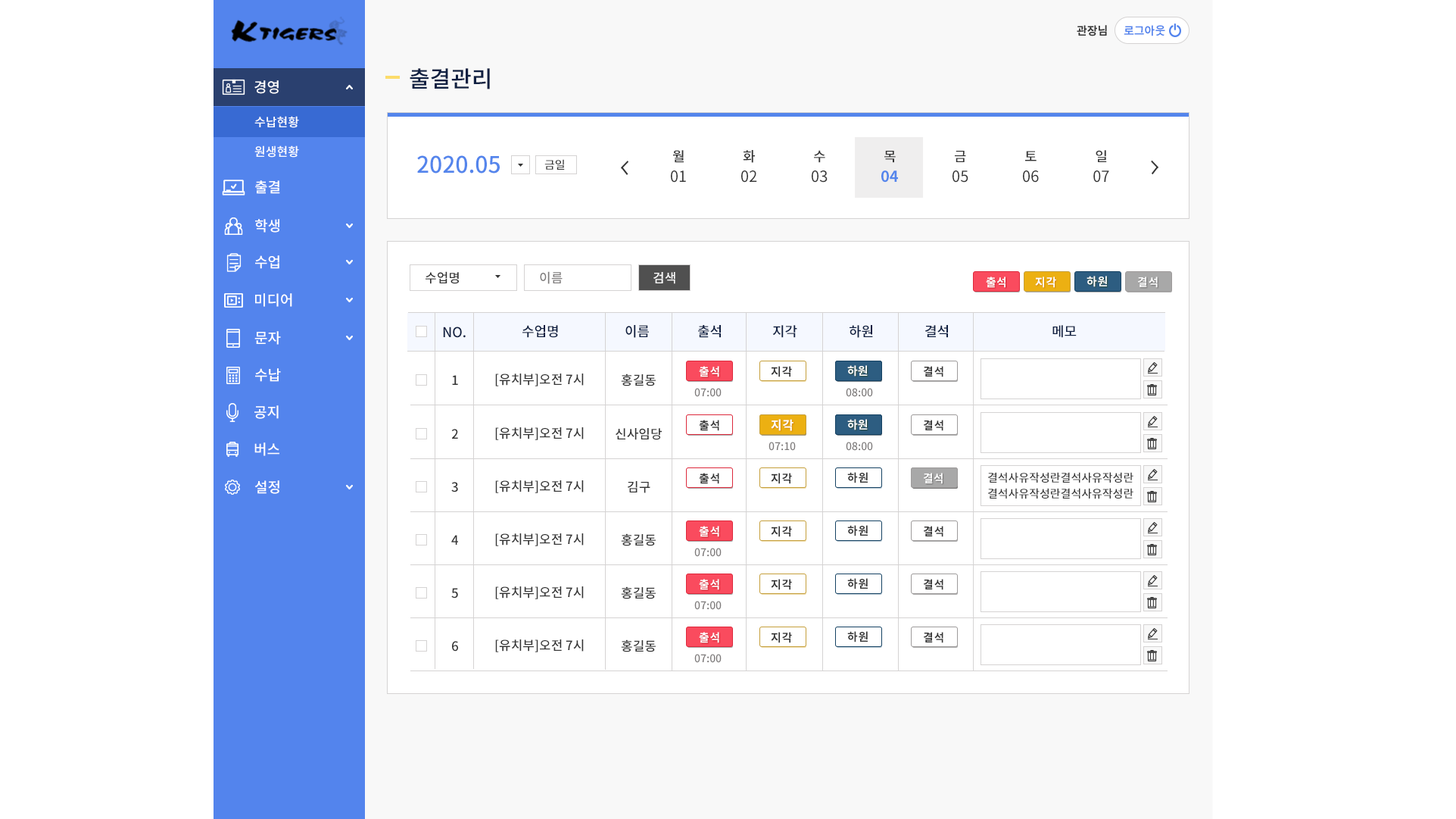
<style>
.page{position:relative;width:1456px;height:819px;background:#ffffff}
.page>*{position:absolute;margin:0}
.t1{font:22.7px "NotoSansCJKkr-Medium";color:#102042;text-transform:uppercase}
.t2{font:13.6px "NotoSansCJKkr-Medium";color:#343434;text-transform:uppercase}
.t3{font:22.7px "NotoSansCJKkr-Medium";color:#5485ec;text-transform:uppercase}
.t4{font:11.4px "NotoSansCJKkr-Medium";color:#343434;text-transform:uppercase}
.t5{font:15.1px "NotoSansCJKkr-Regular";color:#343434;text-transform:uppercase}
.t6{font:15.1px "NotoSansCJKkr-Bold";color:#5485ec;text-transform:uppercase}
.t7{font:12.9px "NotoSansCJKkr-Medium";color:#343434;text-transform:uppercase}
.t8{font:12.9px "NotoSansCJKkr-Medium";color:#7d7a7a;text-transform:uppercase}
.t9{font:12.9px "NotoSansCJKkr-Medium";color:#ffffff;text-transform:uppercase}
.t10{font:11.4px "NotoSansCJKkr-Bold";letter-spacing:0.02em;color:#ffffff;text-transform:uppercase}
.t11{font:11.4px "NotoSansCJKkr-Bold";letter-spacing:0.05em;color:#ffffff;text-transform:uppercase}
.t12{font:13.6px "NotoSansCJKkr-Medium";color:#102042;text-transform:uppercase}
.t13{font:11.4px "NotoSansCJKkr-Bold";letter-spacing:0.05em;color:#343434;text-transform:uppercase}
.t14{font:11.4px "NotoSansCJKkr-Bold";color:#ffffff;text-transform:uppercase}
.t15{font:10.6px "NotoSansCJKkr-Medium";color:#7d7a7a;text-transform:uppercase}
.t16{font:11.4px "NotoSansCJKkr-Bold";letter-spacing:0.05em;text-transform:uppercase}
.t17{font:12.1px "NotoSansCJKkr-Bold";letter-spacing:0.05em;color:#ffffff;text-transform:uppercase}
.t18{font:11.4px/15.9px "NotoSansCJKkr-Medium";color:#343434;text-transform:uppercase}
</style>
<div class="page">
<p class="t1" style="left:410px;top:68px;width:80px;height:21px">출결관리</p>
<p class="t2" style="left:673px;top:150px;width:11px;height:13px">월</p>
<p class="t2" style="left:743px;top:150px;width:12px;height:13px">화</p>
<p class="t2" style="left:814px;top:150px;width:12px;height:13px">수</p>
<p class="t2" style="left:1096px;top:150px;width:11px;height:12px">일</p>
<p class="t3" style="left:417px;top:155px;width:83px;height:18px">2020.05</p>
<p class="t4" style="left:545px;top:159px;width:20px;height:11px">금일</p>
<p class="t2" style="left:885px;top:151px;width:11px;height:12px">목</p>
<p class="t2" style="left:955px;top:151px;width:11px;height:11px">금</p>
<p class="t2" style="left:1025px;top:151px;width:12px;height:10px">토</p>
<p class="t5" style="left:671px;top:170px;width:15px;height:13px">01</p>
<p class="t5" style="left:741px;top:170px;width:16px;height:13px">02</p>
<p class="t5" style="left:812px;top:170px;width:16px;height:13px">03</p>
<p class="t6" style="left:882px;top:170px;width:16px;height:13px">04</p>
<p class="t5" style="left:953px;top:170px;width:16px;height:13px">05</p>
<p class="t5" style="left:1023px;top:170px;width:16px;height:13px">06</p>
<p class="t5" style="left:1094px;top:170px;width:16px;height:13px">07</p>
<p class="t7" style="left:426px;top:271px;width:33px;height:13px">수업명</p>
<p class="t8" style="left:540px;top:271px;width:23px;height:13px">이름</p>
<p class="t9" style="left:654px;top:272px;width:22px;height:12px">검색</p>
<p class="t10" style="left:986px;top:276px;width:20px;height:12px">출석</p>
<p class="t11" style="left:1035px;top:276px;width:22px;height:12px">지각</p>
<p class="t11" style="left:1087px;top:276px;width:20px;height:11px">하원</p>
<p class="t11" style="left:1138px;top:276px;width:20px;height:12px">결석</p>
<p class="t12" style="left:443px;top:326px;width:23px;height:12px">No.</p>
<p class="t12" style="left:523px;top:325px;width:35px;height:13px">수업명</p>
<p class="t12" style="left:626px;top:325px;width:23px;height:13px">이름</p>
<p class="t12" style="left:698px;top:325px;width:23px;height:13px">출석</p>
<p class="t12" style="left:773px;top:325px;width:25px;height:13px">지각</p>
<p class="t12" style="left:850px;top:325px;width:23px;height:13px">하원</p>
<p class="t12" style="left:926px;top:325px;width:22px;height:13px">결석</p>
<p class="t12" style="left:1053px;top:325px;width:24px;height:13px">메모</p>
<p class="t11" style="left:699px;top:366px;width:21px;height:11px">출석</p>
<p class="t13" style="left:771px;top:366px;width:21px;height:11px">지각</p>
<p class="t11" style="left:848px;top:365px;width:20px;height:11px">하원</p>
<p class="t14" style="left:848px;top:365px;width:20px;height:11px">하원</p>
<p class="t13" style="left:924px;top:366px;width:20px;height:11px">결석</p>
<p class="t7" style="left:452px;top:375px;width:6px;height:10px">1</p>
<p class="t7" style="left:495px;top:373px;width:89px;height:13px">[유치부]오전 7시</p>
<p class="t7" style="left:621px;top:373px;width:35px;height:13px">홍길동</p>
<p class="t15" style="left:695px;top:388px;width:27px;height:9px">07:00</p>
<p class="t15" style="left:846px;top:388px;width:27px;height:9px">08:00</p>
<p class="t13" style="left:699px;top:420px;width:21px;height:11px">출석</p>
<p class="t16" style="left:771px;top:420px;width:21px;height:11px">지각</p>
<p class="t17" style="left:771px;top:419px;width:23px;height:12px">지각</p>
<p class="t11" style="left:848px;top:419px;width:20px;height:11px">하원</p>
<p class="t14" style="left:848px;top:419px;width:20px;height:11px">하원</p>
<p class="t13" style="left:924px;top:420px;width:20px;height:11px">결석</p>
<p class="t7" style="left:451px;top:429px;width:7px;height:10px">2</p>
<p class="t7" style="left:495px;top:427px;width:89px;height:13px">[유치부]오전 7시</p>
<p class="t7" style="left:616px;top:428px;width:46px;height:12px">신사임당</p>
<p class="t15" style="left:769px;top:442px;width:27px;height:9px">07:10</p>
<p class="t15" style="left:846px;top:442px;width:27px;height:9px">08:00</p>
<p class="t13" style="left:699px;top:473px;width:21px;height:11px">출석</p>
<p class="t13" style="left:771px;top:473px;width:21px;height:11px">지각</p>
<p class="t13" style="left:848px;top:472px;width:20px;height:11px">하원</p>
<p class="t11" style="left:924px;top:473px;width:20px;height:11px">결석</p>
<p class="t14" style="left:924px;top:473px;width:19px;height:11px">결석</p>
<p class="t18" style="left:988px;top:472px;width:146px;height:27px">결석사유작성란결석사유작성란<br>결석사유작성란결석사유작성란</p>
<p class="t7" style="left:451px;top:482px;width:7px;height:10px">3</p>
<p class="t7" style="left:495px;top:480px;width:89px;height:13px">[유치부]오전 7시</p>
<p class="t7" style="left:628px;top:481px;width:23px;height:12px">김구</p>
<p class="t7" style="left:495px;top:533px;width:89px;height:13px">[유치부]오전 7시</p>
<p class="t7" style="left:621px;top:533px;width:35px;height:13px">홍길동</p>
<p class="t11" style="left:699px;top:526px;width:21px;height:11px">출석</p>
<p class="t13" style="left:771px;top:526px;width:21px;height:11px">지각</p>
<p class="t13" style="left:848px;top:525px;width:20px;height:11px">하원</p>
<p class="t13" style="left:924px;top:526px;width:20px;height:11px">결석</p>
<p class="t7" style="left:451px;top:535px;width:7px;height:10px">4</p>
<p class="t15" style="left:695px;top:548px;width:27px;height:9px">07:00</p>
<p class="t11" style="left:699px;top:579px;width:21px;height:11px">출석</p>
<p class="t13" style="left:771px;top:579px;width:21px;height:11px">지각</p>
<p class="t13" style="left:848px;top:578px;width:20px;height:11px">하원</p>
<p class="t13" style="left:924px;top:579px;width:20px;height:11px">결석</p>
<p class="t7" style="left:451px;top:588px;width:7px;height:10px">5</p>
<p class="t7" style="left:495px;top:586px;width:89px;height:13px">[유치부]오전 7시</p>
<p class="t7" style="left:621px;top:586px;width:35px;height:13px">홍길동</p>
<p class="t15" style="left:695px;top:601px;width:27px;height:9px">07:00</p>
<p class="t7" style="left:452px;top:641px;width:6px;height:10px">6</p>
<p class="t7" style="left:495px;top:639px;width:89px;height:13px">[유치부]오전 7시</p>
<p class="t7" style="left:621px;top:639px;width:35px;height:13px">홍길동</p>
<p class="t11" style="left:699px;top:632px;width:21px;height:11px">출석</p>
<p class="t13" style="left:771px;top:632px;width:21px;height:11px">지각</p>
<p class="t13" style="left:848px;top:631px;width:20px;height:11px">하원</p>
<p class="t13" style="left:924px;top:632px;width:20px;height:11px">결석</p>
<p class="t15" style="left:695px;top:654px;width:27px;height:9px">07:00</p>
</div>
